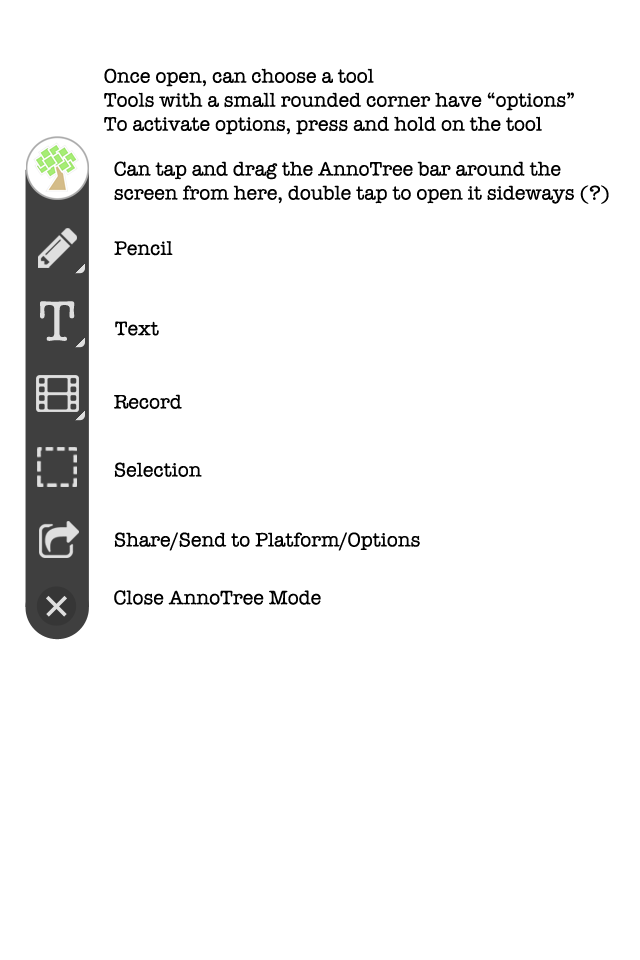
<style>
.page{position:relative;width:640px;height:960px;background:#ffffff}
.page>*{position:absolute;margin:0}
.t1{font:20px "AmericanTypewriter";color:#000000}
.t2{font:58.3px "AmericanTypewriter";color:#dfdfdf}
</style>
<div class="page">
<p class="t1" style="left:104px;top:68px;width:470px;height:67px">Once open, can choose a tool<br>Tools with a small rounded corner have “options”<br>To activate options, press and hold on the tool</p>
<p class="t1" style="left:114px;top:161px;width:495px;height:43px">Can tap and drag the AnnoTree bar around the <br>screen from here, double tap to open it sideways (?)</p>
<p class="t1" style="left:114px;top:241px;width:59px;height:15px">Pencil</p>
<p class="t2" style="left:40px;top:301px;width:35px;height:40px">T</p>
<p class="t1" style="left:115px;top:321px;width:44px;height:15px">Text</p>
<p class="t1" style="left:114px;top:394px;width:68px;height:15px">Record</p>
<p class="t1" style="left:114px;top:462px;width:88px;height:15px">Selection</p>
<p class="t1" style="left:114px;top:532px;width:306px;height:19px">Share/Send to Platform/Options</p>
<p class="t1" style="left:114px;top:590px;width:207px;height:15px">Close AnnoTree Mode</p>
</div>
